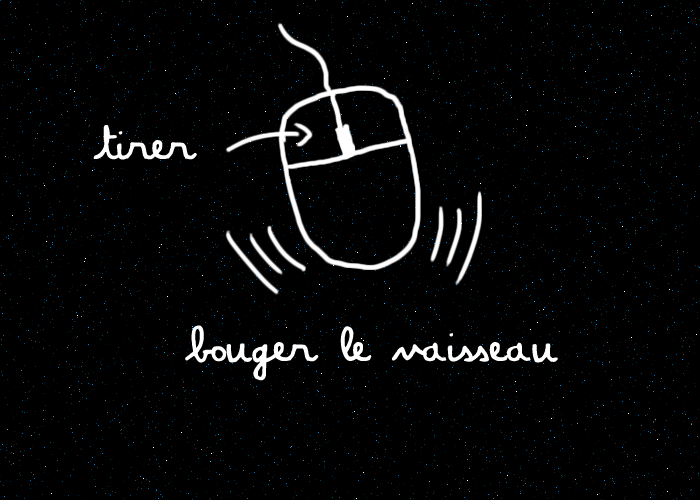
<style>
.page{position:relative;width:700px;height:500px;background:#000000}
.page>*{position:absolute;margin:0}
.t1{font:50px "Amandine";color:#ffffff}
</style>
<div class="page">
<p class="t1" style="left:93px;top:125px;width:104px;height:35px">tirer</p>
<p class="t1" style="left:185px;top:325px;width:373px;height:56px">bouger le vaisseau</p>
</div>
